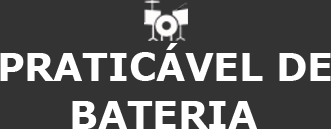
<style>
.page{position:relative;width:331px;height:129px;background:#333333}
.page>*{position:absolute;margin:0}
.t1{font:37.5px "Verdana-Bold";color:#ffffff}
</style>
<div class="page">
<p class="t1" style="left:0px;top:43px;width:331px;height:38px">PRATICÁVEL DE</p>
<p class="t1" style="left:72px;top:101px;width:185px;height:28px">BATERIA</p>
</div>
